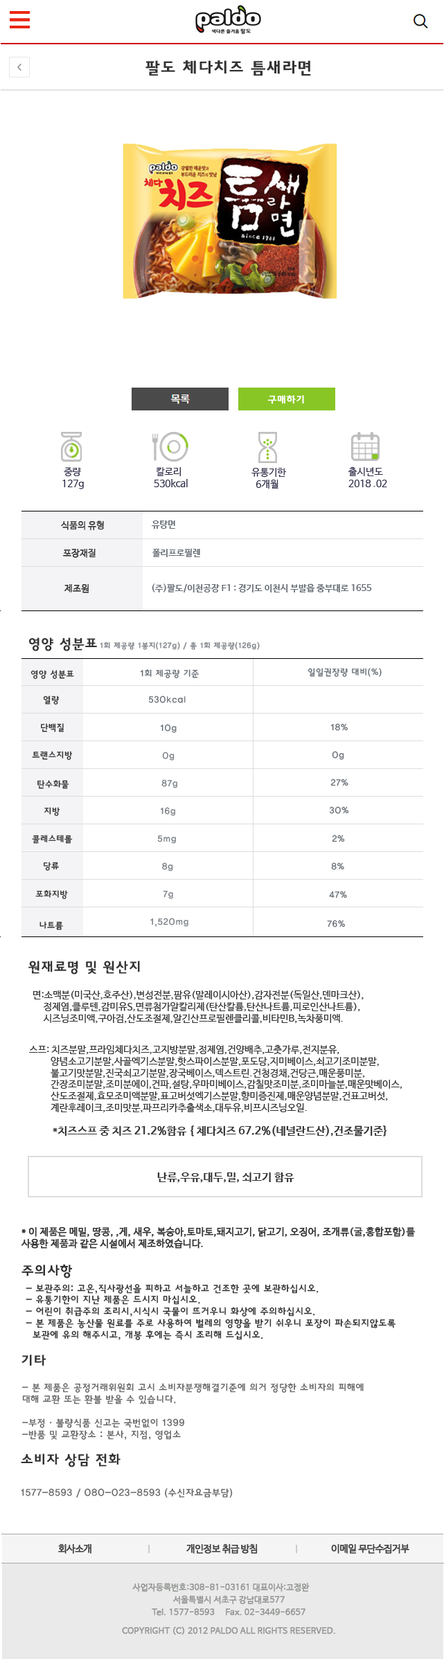
<style>
.page{position:relative;width:444px;height:1659px;background:#ffffff}
.page>*{position:absolute;margin:0}
.t1{font:16.6px "HaanYGodic23";letter-spacing:0.005em;color:#333333;font-weight:bold}
.t2{font:10.4px "HaanYGodic23";letter-spacing:-0.025em;color:#ffffff;font-weight:bold}
.t3{font:9.7px "NanumBarunGothic";color:#33334d}
.t4{font:9px "NanumBarunGothicLight";color:#333333;font-weight:bold}
.t5{font:9px "NanumBarunGothicBold";color:#666d74}
.t6{font:13.8px "HaanYGodic23";color:#333333;font-weight:bold}
.t7{font:7.6px "HaanYGodic23";color:#858a90;font-weight:bold}
.t8{font:9px "HaanYGodic23";color:#333333}
.t9{font:9px "HaanYGodic23";color:#666d74}
.t10{font:9px "HaanYGodic23";color:#747a80}
.t11{font:9.7px "NanumBarunGothic";color:#333333}
.t12{font:11.1px "NanumBarunGothicBold";color:#333333}
.t13{font:9.7px "NanumBarunGothic";color:#333333;font-weight:bold}
.t14{font:9.7px "HaanYGodic23";color:#333333}
.t15{font:9.7px "HaanYGodic23";color:#666666}
.t16{font:9.7px "NanumBarunGothic";letter-spacing:-0.05em;color:#414141;font-weight:bold}
.t17{font:8.3px/6.2px "NanumBarunGothic";letter-spacing:0.005em;color:#949794;font-weight:bold}
</style>
<div class="page">
<p class="t1" style="left:145px;top:60px;width:166px;height:16px">팔도 체다치즈 틈새라면</p>
<p class="t2" style="left:267px;top:395px;width:37px;height:9px">구매하기</p>
<p class="t3" style="left:62px;top:467px;width:22px;height:22px">중량<br>127g</p>
<p class="t3" style="left:154px;top:467px;width:34px;height:20px">칼로리 <br>530kcal</p>
<p class="t3" style="left:251px;top:468px;width:35px;height:21px">유통기한 <br>  6개월</p>
<p class="t3" style="left:348px;top:467px;width:39px;height:20px">출시년도<br>2018 .02</p>
<p class="t4" style="left:61px;top:521px;width:43px;height:9px">식품의 유형</p>
<p class="t5" style="left:152px;top:521px;width:23px;height:8px">유탕면</p>
<p class="t4" style="left:63px;top:548px;width:33px;height:10px">포장재질</p>
<p class="t5" style="left:152px;top:548px;width:48px;height:9px">폴리프로필렌</p>
<p class="t4" style="left:64px;top:584px;width:25px;height:9px">제조원</p>
<p class="t5" style="left:152px;top:584px;width:220px;height:9px">(주)팔도/이천공장 F1 : 경기도 이천시 부발읍 중부대로 1655</p>
<p class="t6" style="left:29px;top:638px;width:68px;height:13px">영양 성분표</p>
<p class="t7" style="left:100px;top:642px;width:160px;height:8px">1회 제공량 1봉지(127g) / 총 1회 제공량(126g)</p>
<p class="t8" style="left:30px;top:670px;width:44px;height:9px">영양 성분표</p>
<p class="t9" style="left:140px;top:669px;width:59px;height:9px">1회 제공량 기준</p>
<p class="t9" style="left:307px;top:668px;width:74px;height:9px">일일권장량 대비(%)</p>
<p class="t8" style="left:43px;top:696px;width:17px;height:9px">열량</p>
<p class="t9" style="left:148px;top:696px;width:38px;height:7px">530kcal</p>
<p class="t8" style="left:41px;top:723px;width:23px;height:9px">단백질</p>
<p class="t9" style="left:160px;top:724px;width:17px;height:9px">10g</p>
<p class="t9" style="left:330px;top:723px;width:18px;height:8px">18%</p>
<p class="t8" style="left:32px;top:751px;width:41px;height:9px">트랜스지방</p>
<p class="t10" style="left:162px;top:752px;width:12px;height:9px">0g</p>
<p class="t9" style="left:332px;top:751px;width:12px;height:9px">0g</p>
<p class="t8" style="left:37px;top:780px;width:32px;height:9px">탄수화물</p>
<p class="t10" style="left:161px;top:780px;width:16px;height:9px">87g</p>
<p class="t9" style="left:330px;top:779px;width:18px;height:7px">27%</p>
<p class="t8" style="left:44px;top:807px;width:16px;height:9px">지방</p>
<p class="t10" style="left:160px;top:807px;width:15px;height:9px">16g</p>
<p class="t9" style="left:329px;top:807px;width:20px;height:7px">30%</p>
<p class="t8" style="left:32px;top:835px;width:41px;height:9px">콜레스테롤</p>
<p class="t10" style="left:157px;top:836px;width:19px;height:8px">5mg</p>
<p class="t9" style="left:332px;top:835px;width:13px;height:8px">2%</p>
<p class="t8" style="left:44px;top:862px;width:15px;height:9px">당류</p>
<p class="t10" style="left:162px;top:863px;width:11px;height:9px">8g</p>
<p class="t9" style="left:331px;top:863px;width:13px;height:7px">8%</p>
<p class="t8" style="left:35px;top:890px;width:33px;height:9px">포화지방</p>
<p class="t10" style="left:163px;top:891px;width:10px;height:8px">7g</p>
<p class="t9" style="left:329px;top:891px;width:18px;height:8px">47%</p>
<p class="t10" style="left:150px;top:918px;width:38px;height:9px">1,520mg</p>
<p class="t8" style="left:39px;top:921px;width:24px;height:9px">나트륨</p>
<p class="t9" style="left:327px;top:920px;width:18px;height:8px">76%</p>
<p class="t6" style="left:28px;top:961px;width:112px;height:14px">원재료명 및 원산지</p>
<p class="t11" style="left:33px;top:990px;width:330px;height:34px">면:소맥분(미국산,호주산),변성전분,팜유(말레이시아산),감자전분(독일산,덴마크산),<br>     정제염,클루텐,감미유S,면류첨가알칼리제(탄산칼륨,탄산나트륨,피로인산나트륨),<br>     시즈닝조미액,구아검,산도조절제,알긴산프로필렌클리콜,비타민B,녹차풍미액.</p>
<p class="t11" style="left:29px;top:1045px;width:373px;height:68px">스프: 치즈분말,프라임체다치즈,고지방분말,정제염,건양배추,고춧가루,전지분유,<br>          양념소고기분말,사골엑기스분말,핫스파이스분말,포도당,지미베이스,쇠고기조미분말,<br>          불고기맛분말,진국쇠고기분말,장국베이스,덱스트린.건청경채,건당근,매운풍미분,<br>          간장조미분말,조미분에이,건파,설탕,우마미베이스,감칠맛조미분,조미마늘분,매운맛베이스,<br>          산도조절제,효모조미액분말,표고버섯엑기스분말,향미증진제,매운양념분말,건표고버섯,<br>          계란후레이크,조미맛분,파프리카추출색소,대두유,비프시즈닝오일.</p>
<p class="t12" style="left:53px;top:1126px;width:333px;height:11px">*치즈스프 중 치즈 21.2%함유 { 체다치즈 67.2%(네널란드산),건조물기준}</p>
<p class="t12" style="left:157px;top:1173px;width:137px;height:10px">난류,우유,대두,밀, 쇠고기 함유</p>
<p class="t13" style="left:21px;top:1227px;width:394px;height:22px">* 이 제품은 메밀, 땅콩, ,게, 새우, 복숭아,토마토,돼지고기, 닭고기, 오징어, 조개류(굴,홍합포함)를<br>사용한 제품과 같은 시설에서 제조하였습니다.</p>
<p class="t6" style="left:21px;top:1265px;width:51px;height:14px">주의사항</p>
<p class="t14" style="left:26px;top:1284px;width:369px;height:57px">- 보관주의: 고온,직사광선을 피하고 서늘하고 건조한 곳에 보관하십시오.<br>- 유통기한이 지난 제품은 드시지 마십시오.<br>- 어린이 취급주의 조리시,시식시 국물이 뜨거우니 화상에 주의하십시오.<br>- 본 제품은 농산물 원료를 주로 사용하여 벌레의 영향을 받기 쉬우니 포장이 파손되지않도록<br>  보관에 유의 해주시고, 개봉 후에는 즉시 조리해 드십시오.</p>
<p class="t6" style="left:21px;top:1355px;width:25px;height:11px">기타</p>
<p class="t15" style="left:22px;top:1383px;width:341px;height:58px">- 본 제품은 공정거래위원회 고시 소비자분쟁해결기준에 의거 정당한 소비자의 피해에<br>대해 교환 또는 환불 받을 수 있습니다.<br><br>-부정 · 불량식품 신고는 국번없이 1399<br>-반품 및 교환장소 : 본사, 지점, 영업소</p>
<p class="t6" style="left:21px;top:1454px;width:99px;height:14px">소비자 상담 전화</p>
<p class="t15" style="left:21px;top:1488px;width:212px;height:10px">1577-8593 / 080-023-8593 (수신자요금부담)</p>
<p class="t16" style="left:58px;top:1545px;width:33px;height:9px">회사소개</p>
<p class="t16" style="left:186px;top:1545px;width:72px;height:9px">개인정보 취급 방침</p>
<p class="t16" style="left:331px;top:1545px;width:78px;height:9px">이메일 무단수집거부</p>
<p class="t17" style="left:122px;top:1583px;width:213px;height:52px">사업자등록번호:308-81-03161 대표이사:고정완<br><br>                                  서울특별시 서초구 강남대로577 <br> <br>                        Tel. 1577-8593     Fax. 02-3449-6657<br>   <br><br>          COPYRIGHT (C) 2012 PALDO ALL RIGHTS RESERVED.</p>
</div>
